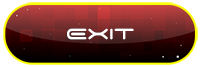
<style>
.page{position:relative;width:200px;height:67px}
.page>*{position:absolute;margin:0}
.t1{font:23.9px "SpaceAge";color:#ffffff}
</style>
<div class="page">
<p class="t1" style="left:67px;top:28px;width:67px;height:12px">Exit</p>
</div>
